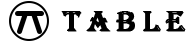
<style>
.page{position:relative;width:195px;height:42px;background:#ffffff}
.page>*{position:absolute;margin:0}
.t1{font:30px "Algerian";letter-spacing:0.2em;color:#000000;font-weight:bold}
</style>
<div class="page">
<p class="t1" style="left:61px;top:11px;width:125px;height:21px">TABLE</p>
</div>
